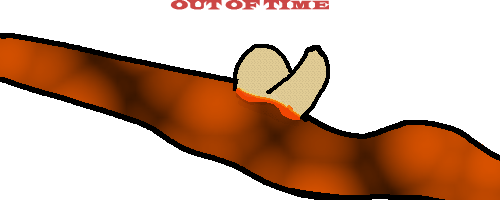
<style>
.page{position:relative;width:500px;height:200px;background:#ffffff}
.page>*{position:absolute;margin:0}
.t1{font:12.5px "LatinWide";color:#cc4746;text-transform:uppercase;font-weight:bold}
</style>
<div class="page">
<p class="t1" style="left:170px;top:0px;width:159px;height:10px">Out of Time</p>
</div>
